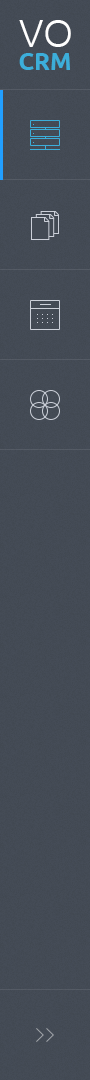
<style>
.page{position:relative;width:90px;height:1080px}
.page>*{position:absolute;margin:0}
.t1{font:24px/23px "Ubuntu-Bold";color:#3caeda;text-transform:uppercase}
.t2{font:39px "Ubuntu-Light";color:#ffffff;text-transform:uppercase}
</style>
<div class="page">
<p class="t1" style="left:19px;top:20px;width:52px;height:50px;text-align:center"><span class="t2">vo<br></span>crm</p>
</div>
